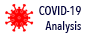
<style>
.page{position:relative;width:88px;height:36px;background:#ffffff}
.page>*{position:absolute;margin:0}
.t1{font:12px "AvenirNextCondensed-Medium";color:#000040}
</style>
<div class="page">
<p class="t1" style="left:39px;top:6px;width:42px;height:27px;text-align:right">COVID-19<br>Analysis</p>
</div>
